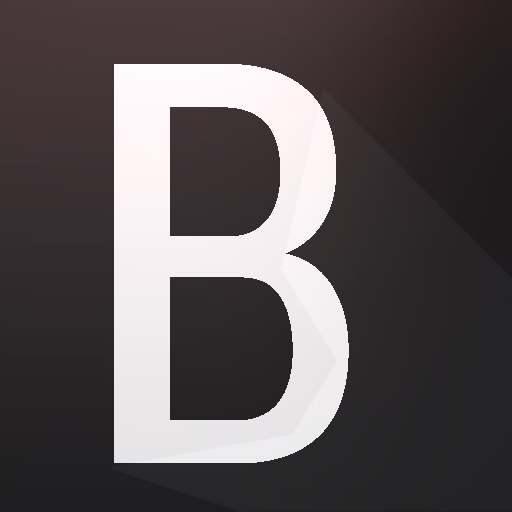
<style>
.page{position:relative;width:512px;height:512px}
.page>*{position:absolute;margin:0}
.t1{font:561px "RobotoCondensed-Regular";color:#e2e2e2}
</style>
<div class="page">
<p class="t1" style="left:114px;top:64px;width:235px;height:399px">B</p>
</div>
